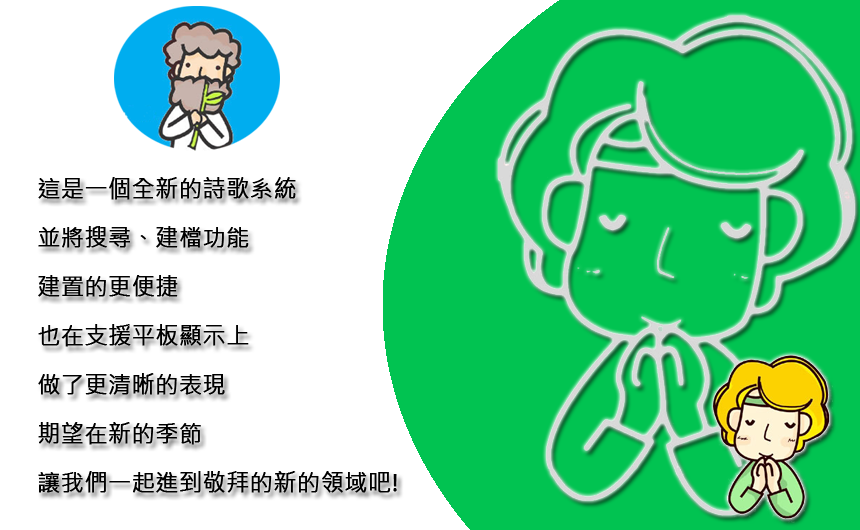
<style>
.page{position:relative;width:860px;height:530px;background:#ffffff}
.page>*{position:absolute;margin:0}
.t1{font:23px/49px "MicrosoftJhengHeiRegular";color:#000000;font-weight:bold}
</style>
<div class="page">
<p class="t1" style="left:38px;top:177px;width:359px;height:316px">這是一個全新的詩歌系統<br>並將搜尋、建檔功能<br>建置的更便捷<br>也在支援平板顯示上<br>做了更清晰的表現<br>期望在新的季節<br>讓我們一起進到敬拜的新的領域吧!</p>
</div>
